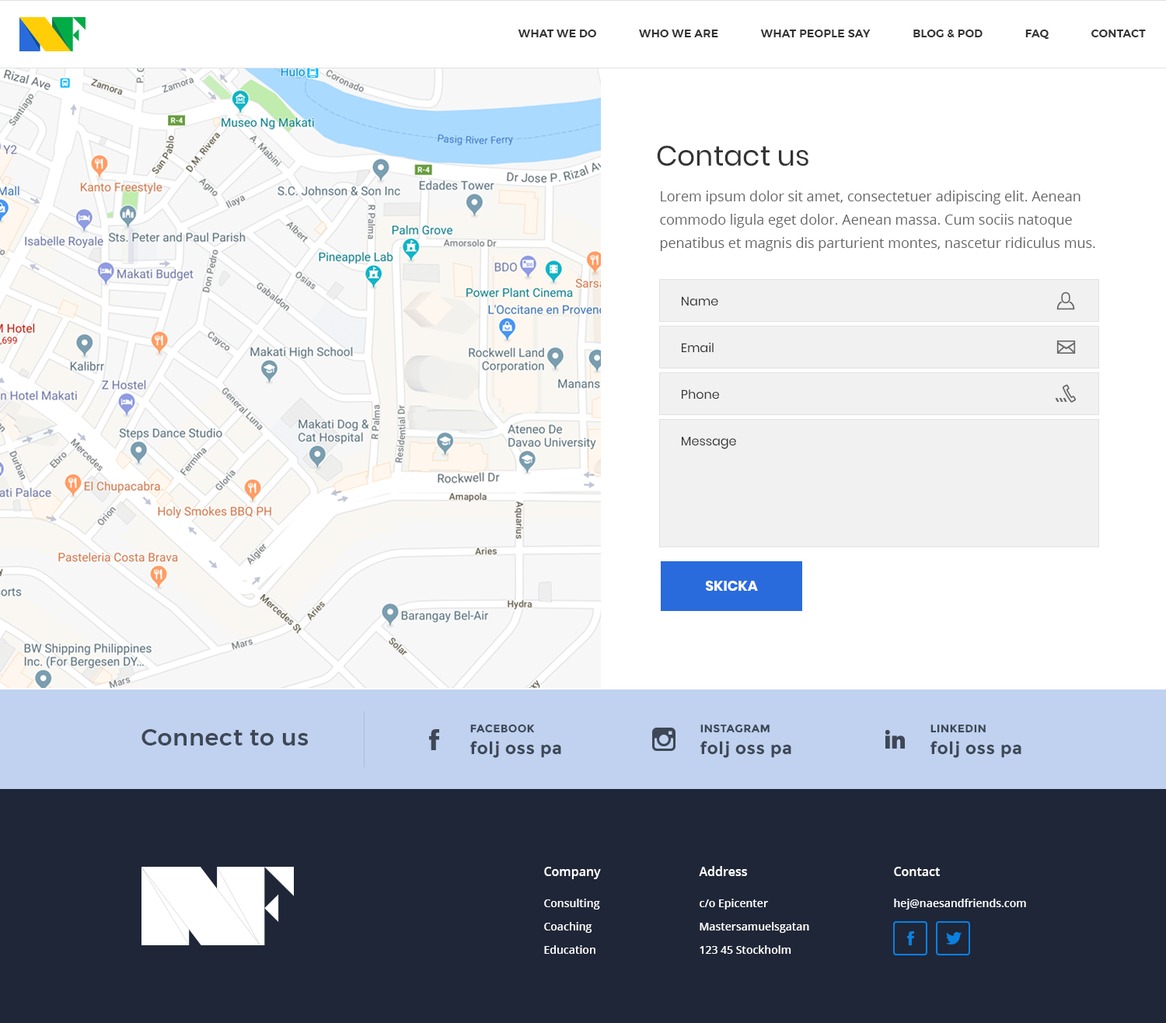
<style>
.page{position:relative;width:1166px;height:1023px;background:#ffffff}
.page>*{position:absolute;margin:0}
.t1{font:10.9px "Montserrat-SemiBold";letter-spacing:0.025em;color:#333333;text-transform:uppercase}
.t2{font:28px "Poppins-Regular";color:#333333}
.t3{font:14px/23.3px "OpenSans";color:#666666}
.t4{font:12.4px "Poppins-Regular";color:#333333}
.t5{font:14px "Poppins-Bold";color:#fffefe;text-transform:uppercase}
.t6{font:10.9px "Montserrat-Bold";letter-spacing:0.025em;color:#3e4755;text-transform:uppercase}
.t7{font:23.3px "Montserrat-Medium";letter-spacing:0.025em;color:#3e4755}
.t8{font:17.1px "Montserrat-Bold";letter-spacing:0.025em;color:#3e4755}
.t9{font:12.4px "OpenSans-Semibold";color:#ffffff}
.t10{font:10.9px/23.3px "OpenSans-Semibold";color:#ffffff}
.t11{font:10.9px "OpenSans-Semibold";color:#ffffff}
</style>
<div class="page">
<p class="t1" style="left:518px;top:30px;width:628px;height:9px">what we do               who we are               what people say               blog &amp; pod               faq               contact</p>
<p class="t2" style="left:657px;top:145px;width:151px;height:21px">Contact us</p>
<p class="t3" style="left:660px;top:190px;width:435px;height:61px">Lorem ipsum dolor sit amet, consectetuer adipiscing elit. Aenean commodo ligula eget dolor. Aenean massa. Cum sociis natoque penatibus et magnis dis parturient montes, nascetur ridiculus mus.</p>
<p class="t4" style="left:682px;top:296px;width:36px;height:9px">Name</p>
<p class="t4" style="left:682px;top:342px;width:31px;height:10px">Email</p>
<p class="t4" style="left:682px;top:389px;width:37px;height:10px">Phone</p>
<p class="t4" style="left:682px;top:437px;width:54px;height:12px">Message</p>
<p class="t5" style="left:706px;top:581px;width:52px;height:10px">skicka</p>
<p class="t6" style="left:470px;top:724px;width:65px;height:9px">facebook</p>
<p class="t6" style="left:700px;top:724px;width:69px;height:9px">instagram</p>
<p class="t6" style="left:930px;top:724px;width:56px;height:9px">linkedin</p>
<p class="t7" style="left:141px;top:729px;width:168px;height:16px">Connect to us</p>
<p class="t8" style="left:470px;top:741px;width:91px;height:17px">folj oss pa</p>
<p class="t8" style="left:700px;top:741px;width:91px;height:17px">folj oss pa</p>
<p class="t8" style="left:930px;top:741px;width:91px;height:17px">folj oss pa</p>
<p class="t9" style="left:544px;top:867px;width:57px;height:12px">Company</p>
<p class="t9" style="left:699px;top:866px;width:48px;height:10px">Address</p>
<p class="t9" style="left:894px;top:867px;width:46px;height:9px">Contact</p>
<p class="t10" style="left:544px;top:898px;width:56px;height:56px">Consulting<br>Coaching<br>Education</p>
<p class="t10" style="left:699px;top:898px;width:110px;height:56px">c/o Epicenter<br>Mastersamuelsgatan<br>123 45 Stockholm</p>
<p class="t11" style="left:894px;top:898px;width:132px;height:11px">hej@naesandfriends.com</p>
</div>
